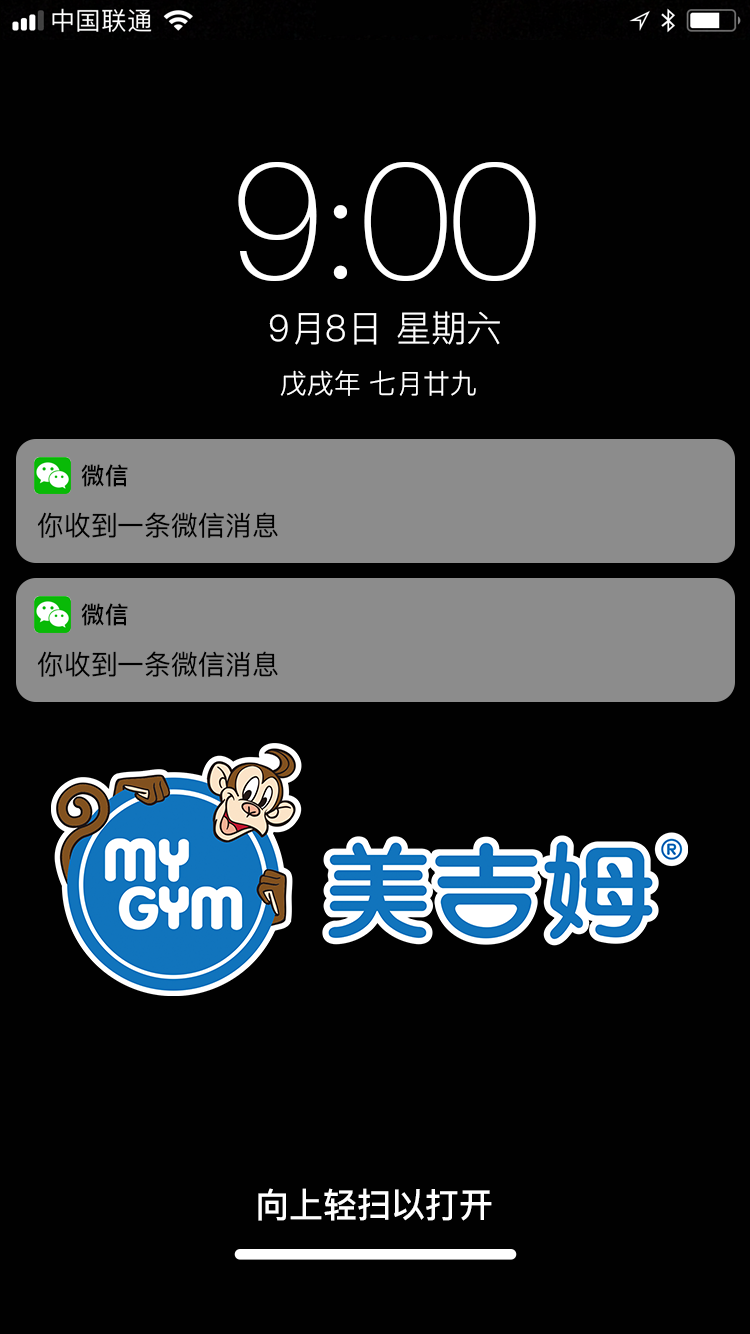
<style>
.page{position:relative;width:750px;height:1334px;background:#010101}
.page>*{position:absolute;margin:0}
.t1{font:165.5px "HelveticaNeue-Thin";letter-spacing:-0.01em;color:#ffffff}
.t2{font:165.5px "PingFangSC-Thin";letter-spacing:-0.01em;color:#ffffff}
.t3{font:36.2px "PingFangSC-Light";color:#ffffff}
.t4{font:27.2px "PingFangSC-Light";color:#ffffff}
.t5{font:23.7px "PingFangSC-Medium";color:#000000}
.t6{font:27.2px "PingFangSC-Regular";color:#010101}
.t7{font:34.4px "PingFangSC-Medium";color:#ffffff}
</style>
<div class="page">
<p class="t1" style="left:238px;top:162px;width:298px;height:119px">9<span class="t2">:</span>00</p>
<p class="t3" style="left:269px;top:311px;width:231px;height:34px">9月8日 星期六</p>
<p class="t4" style="left:280px;top:370px;width:196px;height:26px">戊戌年 七月廿九</p>
<p class="t5" style="left:81px;top:464px;width:47px;height:23px">微信</p>
<p class="t6" style="left:37px;top:512px;width:241px;height:26px">你收到一条微信消息</p>
<p class="t5" style="left:81px;top:603px;width:47px;height:23px">微信</p>
<p class="t6" style="left:37px;top:651px;width:241px;height:26px">你收到一条微信消息</p>
<p class="t7" style="left:258px;top:1188px;width:234px;height:33px">向上轻扫以打开</p>
</div>
